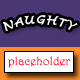
<style>
.page{position:relative;width:80px;height:80px;background:#4a3874}
.page>*{position:absolute;margin:0}
.t1{font:11px "LucidaHandwriting-Italic";letter-spacing:0.08em;color:#ffffff}
.t2{font:12px "Harrington";color:#ff0036}
</style>
<div class="page">
<p class="t1" style="left:3px;top:15px;width:75px;height:16px">NAUGHTY</p>
<p class="t2" style="left:8px;top:56px;width:63px;height:12px">placeholder</p>
</div>
